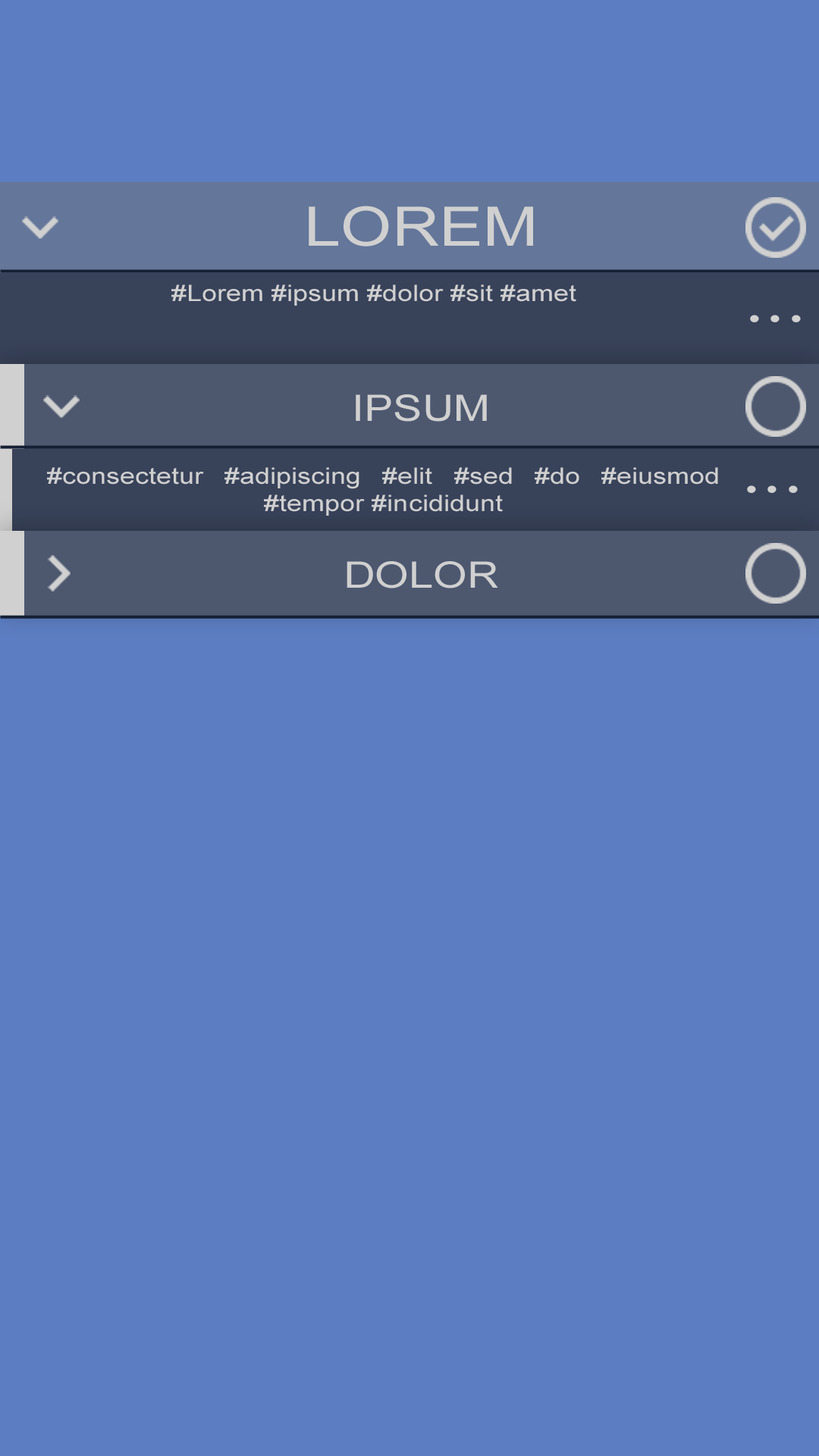
<style>
.page{position:relative;width:819px;height:1456px;background:#5c7dc1}
.page>*{position:absolute;margin:0}
.t1{font:54.6px "ArialMT";color:#d0d0d0;scale:1.2 1}
.t2{font:22.7px "ArialMT";color:#d0d0d0;scale:1.2 1}
.t3{font:54.6px "BitstreamVeraSerif-Roman";color:#d0d0d0;scale:1.2 1}
.t4{font:36.4px "ArialMT";color:#d0d0d0;scale:1.2 1}
</style>
<div class="page">
<p class="t1" style="left:309px;top:206px;width:224px;height:40px">LOREM</p>
<p class="t2" style="left:171px;top:284px;width:405px;height:22px">#Lorem #ipsum #dolor #sit #amet</p>
<p class="t3" style="left:750px;top:315px;width:51px;height:7px">...</p>
<p class="t4" style="left:356px;top:394px;width:131px;height:28px">IPSUM</p>
<p class="t2" style="left:47px;top:467px;width:671px;height:49px;text-align:justify">#consectetur #adipiscing #elit #sed #do #eiusmod #tempor #incididunt</p>
<p class="t3" style="left:747px;top:485px;width:51px;height:8px">...</p>
<p class="t4" style="left:347px;top:561px;width:151px;height:27px">DOLOR</p>
</div>
